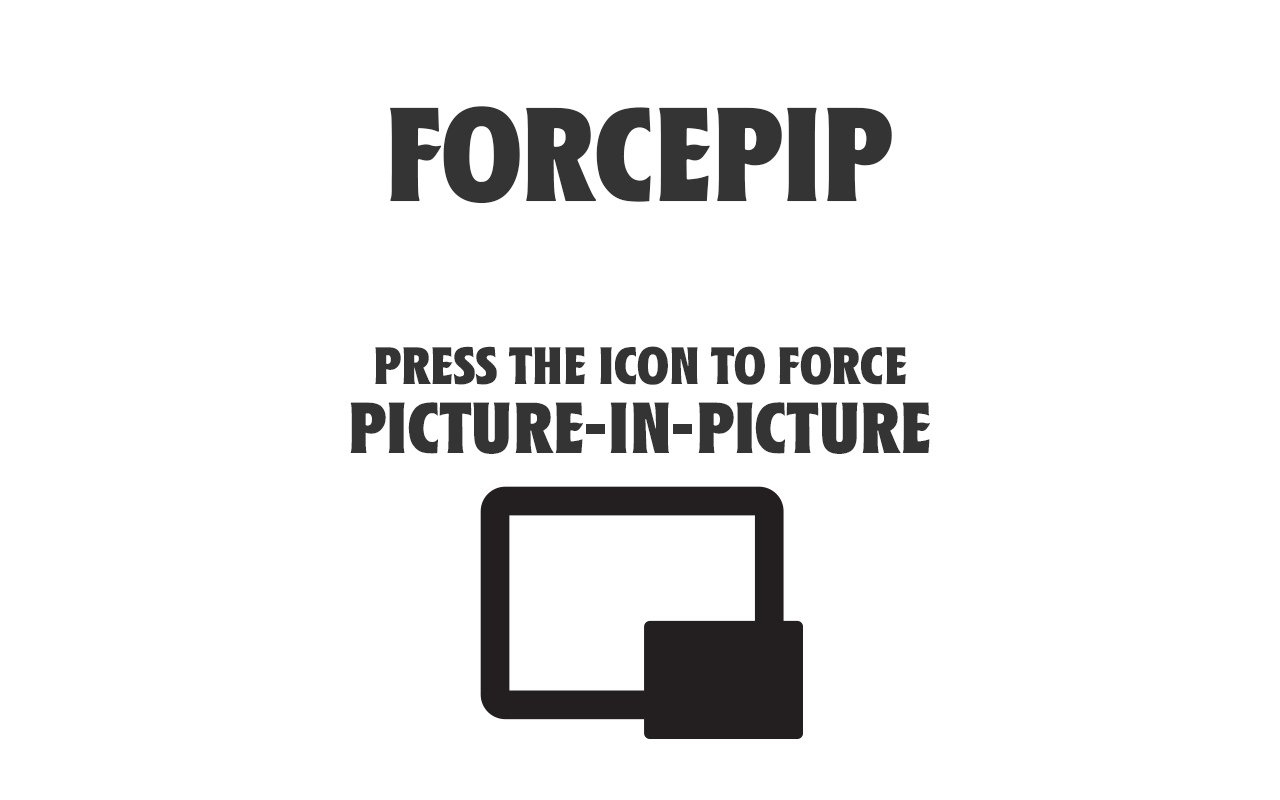
<style>
.page{position:relative;width:1280px;height:800px;background:#ffffff}
.page>*{position:absolute;margin:0}
.t1{font:130.9px "A&S-Marquee";color:#343434;text-transform:uppercase}
.t2{font:51.7px/112.8px "A&S-Marquee";color:#343434;text-transform:uppercase}
.t3{font:70.8px/12.8px "A&S-Marquee";color:#343434;text-transform:uppercase}
</style>
<div class="page">
<p class="t1" style="left:390px;top:106px;width:502px;height:98px">Forcepip</p>
<p class="t2" style="left:350px;top:346px;width:580px;height:108px;text-align:center">PRess the ICon to force<br><span class="t3">Picture-in-Picture</span></p>
</div>
